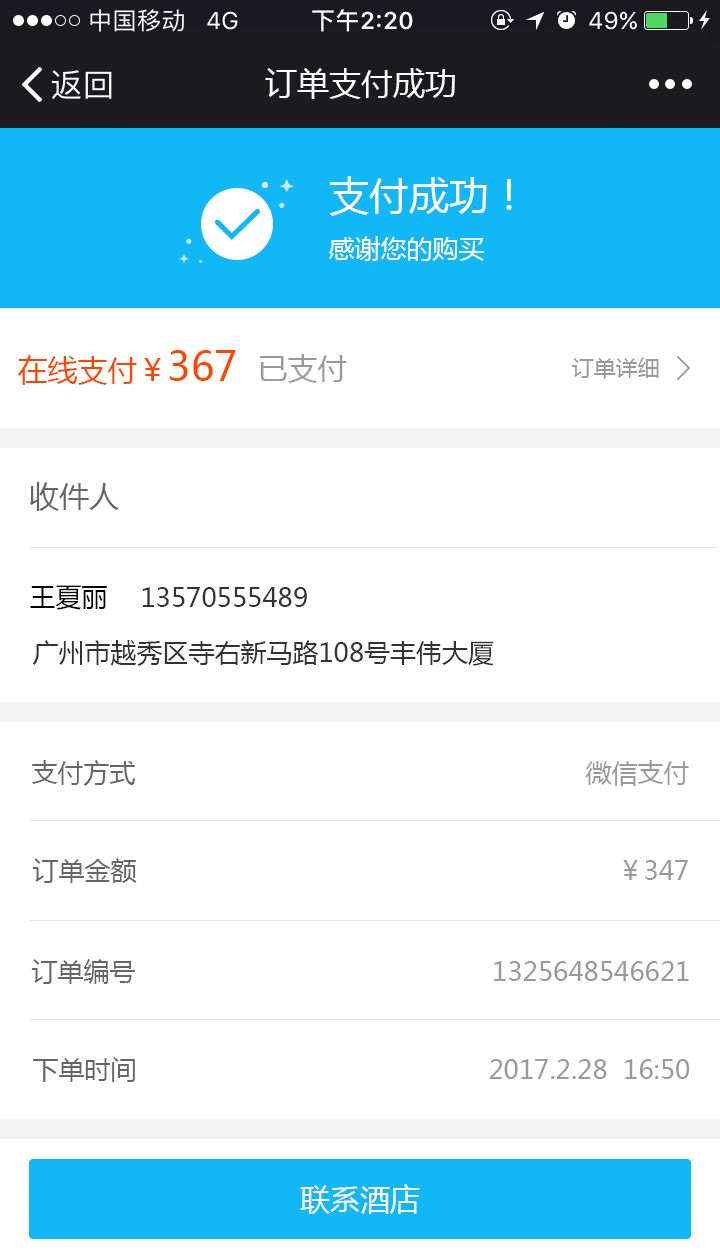
<style>
.page{position:relative;width:720px;height:1259px;background:#ffffff}
.page>*{position:absolute;margin:0}
.t1{font:32px "MicrosoftYaHei";color:#ffffff}
.t2{font:26px/36px "MicrosoftYaHei";color:#ffffff}
.t3{font:40px/60px "MicrosoftYaHei";color:#ffffff}
.t4{font:30px "MicrosoftYaHei";color:#ff4400}
.t5{font:40px "MicrosoftYaHei";color:#ff4400}
.t6{font:30px "MicrosoftYaHei";color:#999999}
.t7{font:22px "MicrosoftYaHei";color:#999999}
.t8{font:30px "MicrosoftYaHei";color:#666666}
.t9{font:26px "MicrosoftYaHei";color:#000000}
.t10{font:26px "MicrosoftYaHei";color:#333333}
.t11{font:26px "MicrosoftYaHei";color:#666666}
.t12{font:26px "MicrosoftYaHei";color:#999999}
.t13{font:30px "MicrosoftYaHei";color:#fefefe}
</style>
<div class="page">
<p class="t1" style="left:265px;top:68px;width:190px;height:31px">订单支付成功</p>
<p class="t2" style="left:329px;top:176px;width:183px;height:85px"><span class="t3">支付成功！<br></span>感谢您的购买</p>
<p class="t4" style="left:17px;top:350px;width:219px;height:35px">在线支付￥<span class="t5">367</span></p>
<p class="t6" style="left:259px;top:354px;width:88px;height:29px">已支付</p>
<p class="t7" style="left:572px;top:357px;width:87px;height:22px">订单详细</p>
<p class="t8" style="left:30px;top:482px;width:89px;height:29px">收件人</p>
<p class="t9" style="left:30px;top:585px;width:77px;height:25px">王夏丽</p>
<p class="t10" style="left:142px;top:587px;width:165px;height:20px">13570555489</p>
<p class="t10" style="left:32px;top:640px;width:462px;height:26px">广州市越秀区寺右新马路108号丰伟大厦</p>
<p class="t11" style="left:32px;top:760px;width:104px;height:26px">支付方式</p>
<p class="t12" style="left:585px;top:760px;width:104px;height:26px">微信支付</p>
<p class="t11" style="left:32px;top:858px;width:105px;height:25px">订单金额</p>
<p class="t12" style="left:623px;top:860px;width:65px;height:20px">￥347</p>
<p class="t11" style="left:31px;top:959px;width:104px;height:25px">订单编号</p>
<p class="t12" style="left:494px;top:961px;width:195px;height:20px">1325648546621</p>
<p class="t11" style="left:33px;top:1057px;width:102px;height:25px">下单时间</p>
<p class="t12" style="left:489px;top:1059px;width:201px;height:20px">2017.2.28  16:50</p>
<p class="t13" style="left:300px;top:1184px;width:120px;height:30px">联系酒店</p>
</div>
